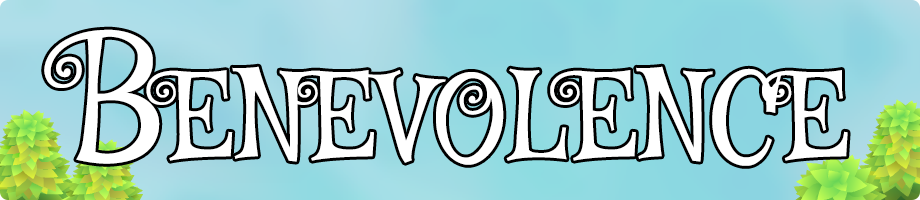
<style>
.page{position:relative;width:920px;height:200px}
.page>*{position:absolute;margin:0}
.t1{font:169.8px "MysteryQuest";color:#ffffff;font-variant:small-caps}
</style>
<div class="page">
<p class="t1" style="left:44px;top:29px;width:804px;height:137px">Benevolence</p>
</div>
